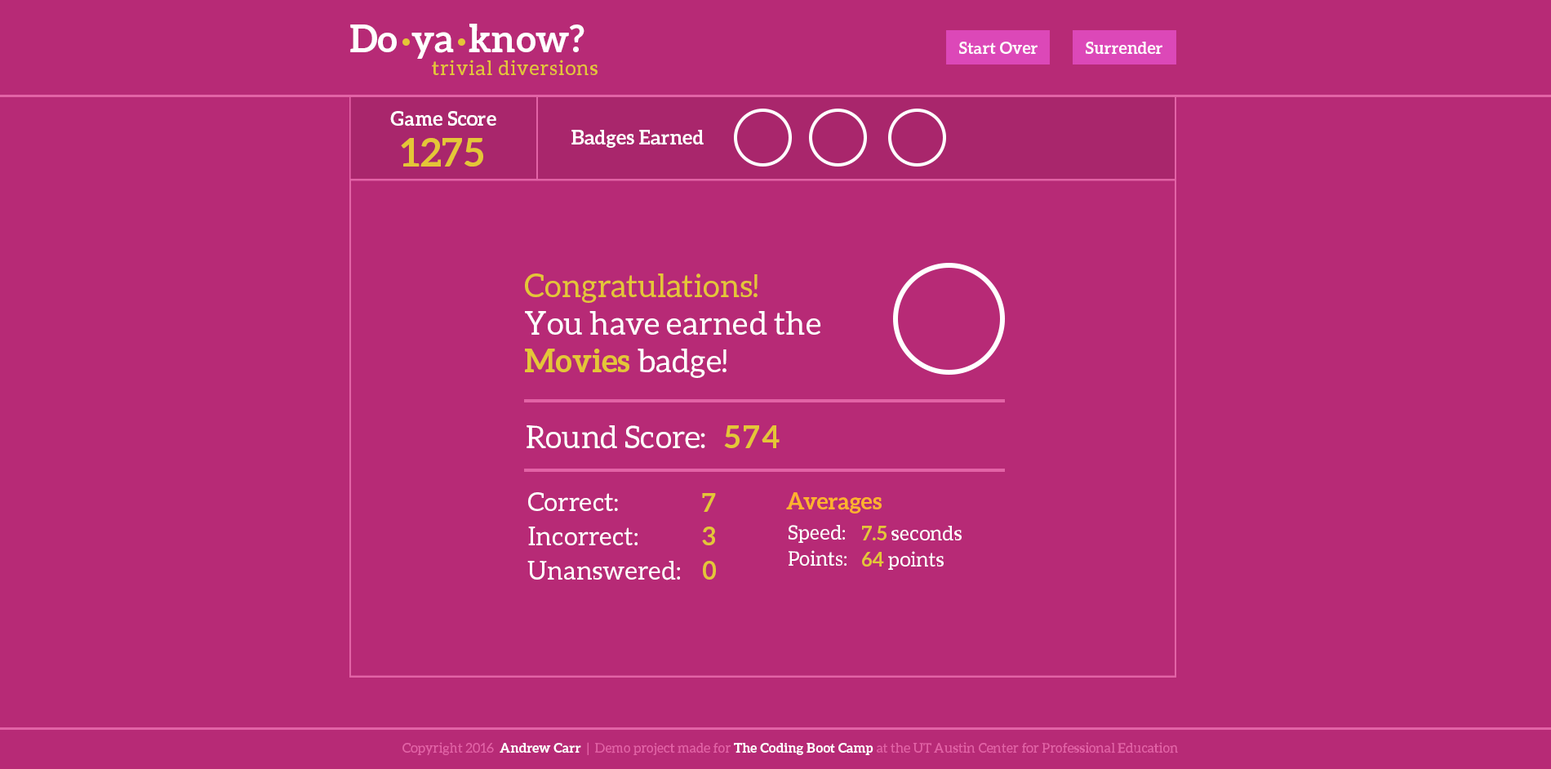
<style>
.page{position:relative;width:1551px;height:769px;background:#b72a76}
.page>*{position:absolute;margin:0}
.t1{font:37.9px "Aleo-Bold";color:#ffffff}
.t2{font:16.3px "Aleo-Bold";letter-spacing:0.01em;color:#ffffff}
.t3{font:19.6px "Aleo-Regular";letter-spacing:0.05em;color:#e4c637}
.t4{font:19.6px "Aleo-Bold";letter-spacing:0.01em;color:#ffffff}
.t5{font:39.2px "Aleo-Bold";letter-spacing:0.01em;color:#e4c637}
.t6{font:32px/37.3px "Aleo-Regular";color:#ffffff}
.t7{font:32px/37.3px "Aleo-Regular";color:#e4c637}
.t8{font:32px/37.3px "Aleo-Bold";color:#e4c637}
.t9{font:31.1px "Aleo-Regular";color:#ffffff}
.t10{font:31.1px "Aleo-Bold";letter-spacing:0.05em;color:#e4c637}
.t11{font:25.6px/34.1px "Aleo-Regular";color:#ffffff}
.t12{font:25.6px/34.1px "Aleo-Bold";color:#e4c637}
.t13{font:22.7px "Aleo-Bold";color:#ffb22d}
.t14{font:19.9px/25.6px "Aleo-Regular";color:#ffffff}
.t15{font:19.9px/25.6px "Aleo-Bold";color:#e4c637}
.t16{font:13.1px "Aleo-Regular";letter-spacing:0.01em;color:#e262a6}
.t17{font:13.1px "Aleo-Bold";letter-spacing:0.01em;color:#ffffff}
</style>
<div class="page">
<p class="t1" style="left:350px;top:24px;width:234px;height:35px">Do ya know?</p>
<p class="t2" style="left:959px;top:42px;width:78px;height:13px">Start Over</p>
<p class="t2" style="left:1086px;top:42px;width:76px;height:12px">Surrender</p>
<p class="t3" style="left:432px;top:60px;width:165px;height:16px">trivial diversions</p>
<p class="t4" style="left:390px;top:111px;width:106px;height:16px">Game Score</p>
<p class="t5" style="left:401px;top:138px;width:82px;height:29px">1275</p>
<p class="t4" style="left:571px;top:130px;width:133px;height:18px">Badges Earned</p>
<p class="t6" style="left:525px;top:273px;width:296px;height:105px"><span class="t7">Congratulations!<br></span>You have earned the<br><span class="t8">Movies</span> badge!</p>
<p class="t9" style="left:526px;top:425px;width:179px;height:24px">Round Score:</p>
<p class="t10" style="left:724px;top:425px;width:56px;height:23px">574</p>
<p class="t11" style="left:527px;top:492px;width:153px;height:88px">Correct: <br>Incorrect:<br>Unanswered:</p>
<p class="t12" style="left:702px;top:493px;width:14px;height:87px">7<br>3<br>0</p>
<p class="t13" style="left:786px;top:492px;width:96px;height:21px">Averages</p>
<p class="t14" style="left:788px;top:525px;width:58px;height:41px">Speed:<br>Points:</p>
<p class="t14" style="left:862px;top:526px;width:100px;height:44px"><span class="t15">7.5</span> seconds<br><span class="t15">64</span> points</p>
<p class="t16" style="left:402px;top:742px;width:776px;height:13px">Copyright 2016  <span class="t17">Andrew Carr</span>  |  Demo project made for <span class="t17">The Coding Boot Camp</span> at the UT Austin Center for Professional Education</p>
</div>
